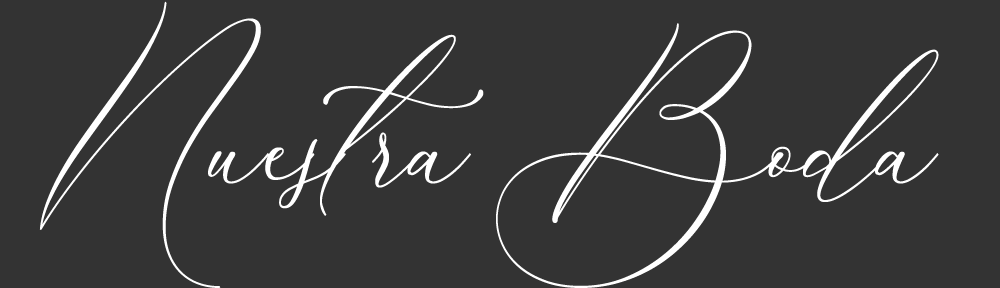
<style>
.page{position:relative;width:1000px;height:288px;background:#333333}
.page>*{position:absolute;margin:0}
.t1{font:237.9px "BohemeFloral";color:#ffffff;scale:0.87 1}
</style>
<div class="page">
<p class="t1" style="left:39px;top:1px;width:900px;height:287px">Nuestra Boda</p>
</div>
